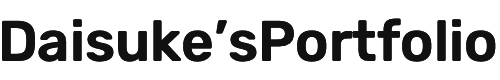
<style>
.page{position:relative;width:500px;height:80px;background:#ffffff}
.page>*{position:absolute;margin:0}
.t1{font:56.5px "Rubik-Medium";color:#111111}
</style>
<div class="page">
<p class="t1" style="left:2px;top:18px;width:494px;height:44px">Daisuke’sPortfolio</p>
</div>
